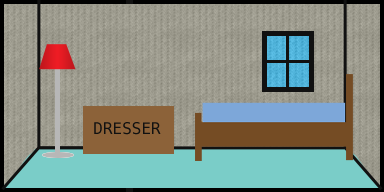
<style>
.page{position:relative;width:384px;height:192px}
.page>*{position:absolute;margin:0}
.t1{font:16px "Menlo-Regular";color:#111111}
</style>
<div class="page">
<p class="t1" style="left:94px;top:122px;width:67px;height:13px">DRESSER</p>
</div>
